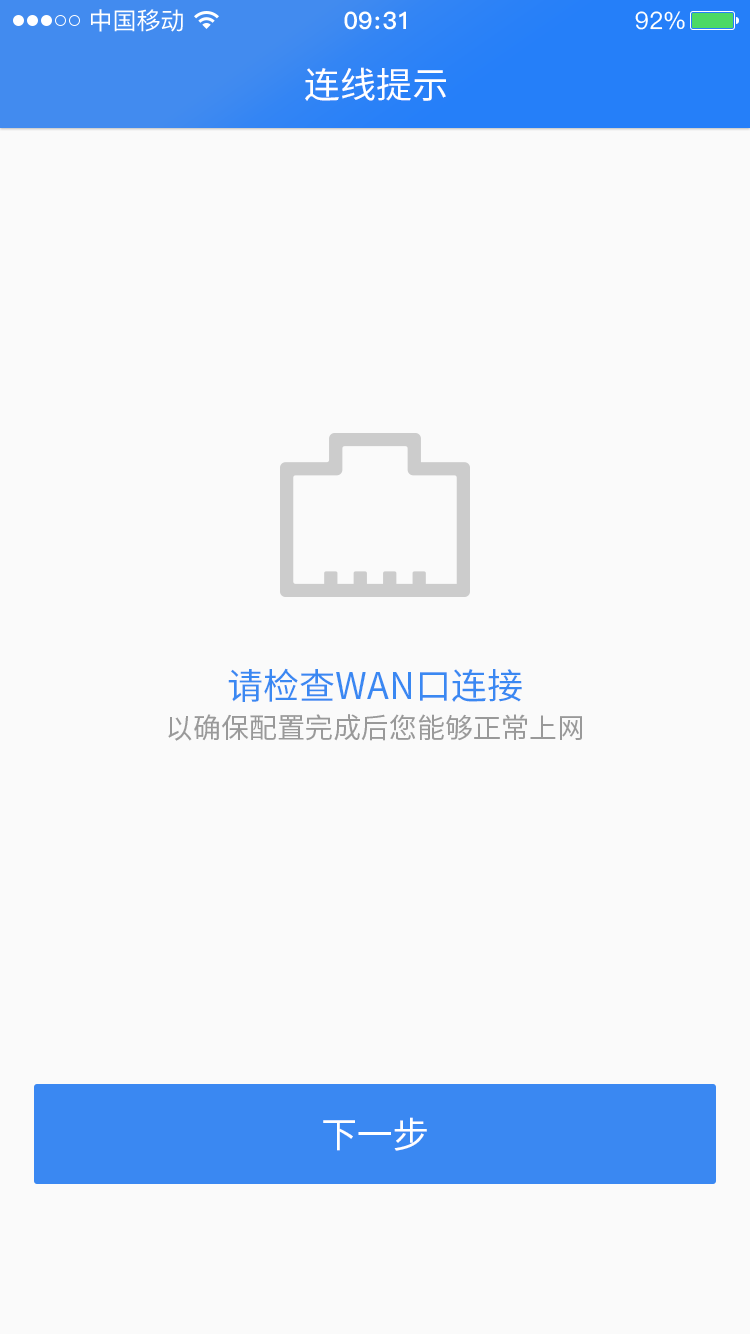
<style>
.page{position:relative;width:750px;height:1334px;background:#fafafa}
.page>*{position:absolute;margin:0}
.t1{font:36px "SourceHanSansCN-Regular";color:#ffffff}
.t2{font:36px "SourceHanSansCN-Regular";color:#3a88f2}
.t3{font:28px "SourceHanSansCN-Regular";color:#999999}
</style>
<div class="page">
<p class="t1" style="left:305px;top:67px;width:141px;height:34px">连线提示</p>
<p class="t2" style="left:228px;top:668px;width:294px;height:34px">请检查WAN口连接</p>
<p class="t3" style="left:168px;top:714px;width:414px;height:27px">以确保配置完成后您能够正常上网</p>
<p class="t1" style="left:323px;top:1117px;width:104px;height:34px">下一步</p>
</div>
